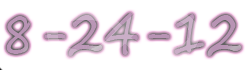
<style>
.page{position:relative;width:245px;height:70px;background:#ffffff}
.page>*{position:absolute;margin:0}
.t1{font:58px "SegoeScript";scale:0.85 1}
</style>
<div class="page">
<p class="t1" style="left:6px;top:13px;width:236px;height:43px">8-24-12</p>
</div>
